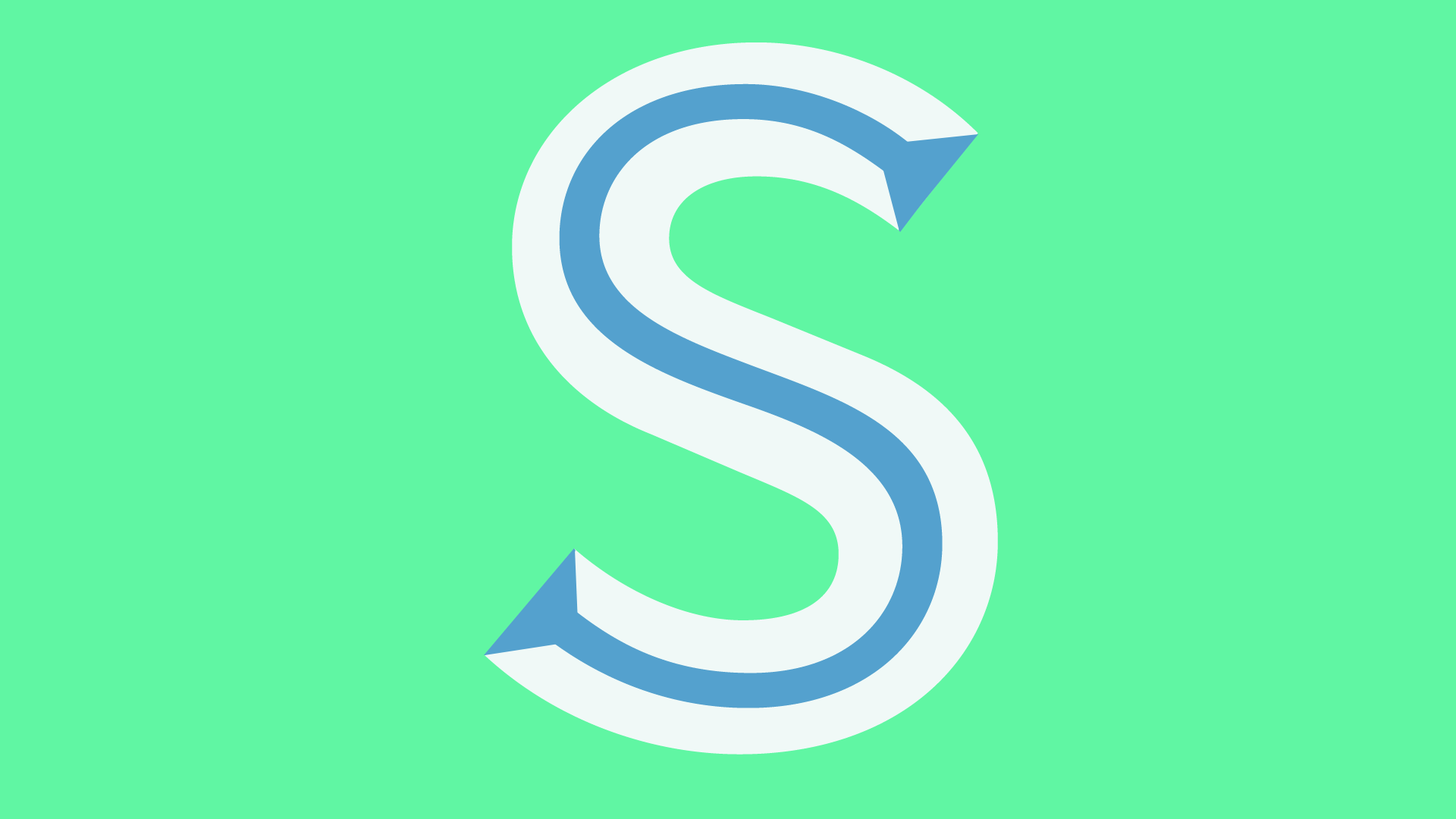
<style>
.page{position:relative;width:1456px;height:819px;background:#60f6a3}
.page>*{position:absolute;margin:0}
.t1{font:1053.2px "SourceSansPro-Bold";color:#f0f9f7}
.t2{font:1242.8px "SourceSansPro-ExtraLight";color:#54a1ce}
</style>
<div class="page">
<p class="t1" style="left:485px;top:42px;width:513px;height:713px">S</p>
<p class="t2" style="left:532px;top:83px;width:411px;height:625px">s</p>
</div>
